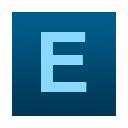
<style>
.page{position:relative;width:128px;height:128px;background:#ffffff}
.page>*{position:absolute;margin:0}
.t1{font:83.3px "Arial-BoldMT";color:#88d8ff}
</style>
<div class="page">
<p class="t1" style="left:41px;top:32px;width:46px;height:60px">E</p>
</div>
